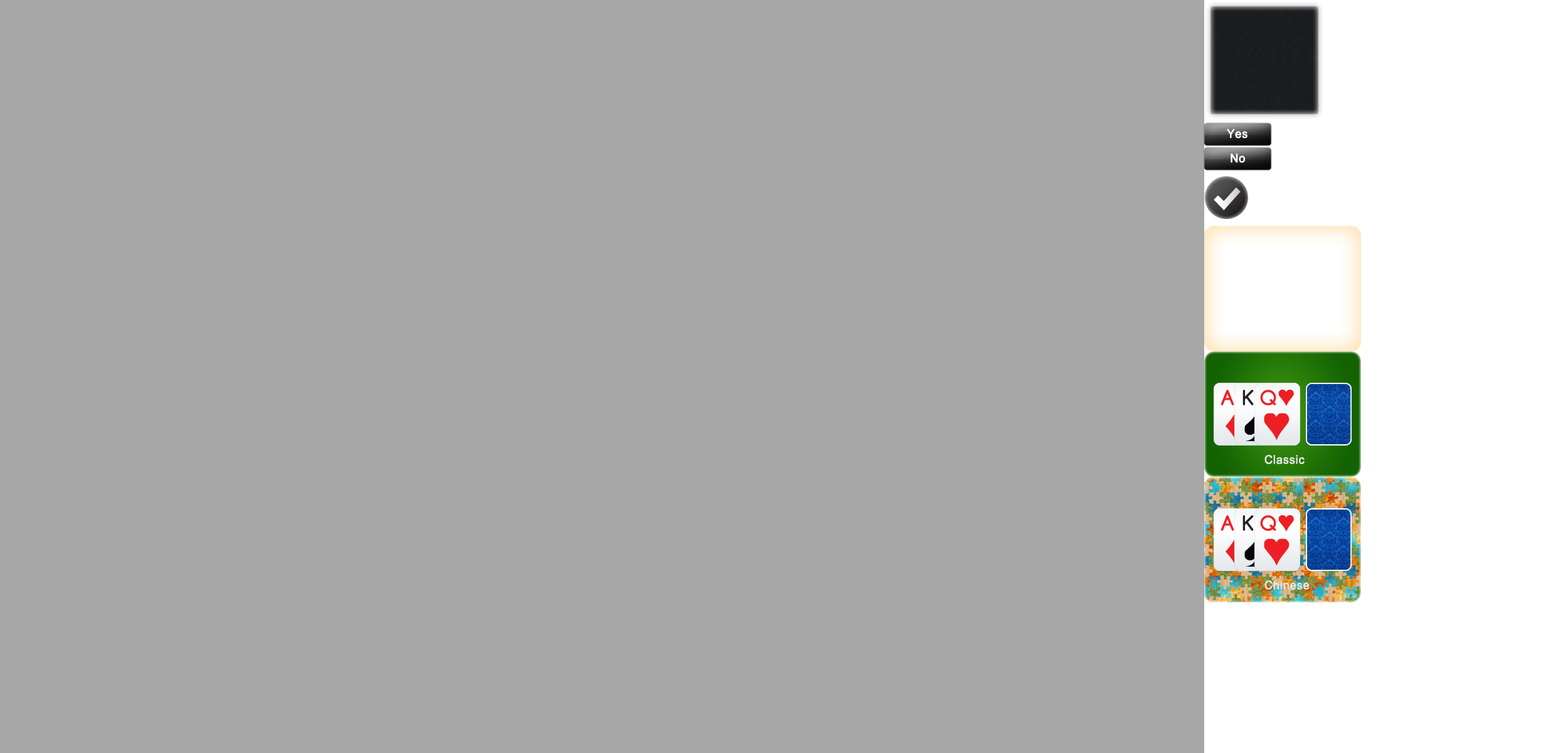
<style>
.page{position:relative;width:1568px;height:753px;background:#a7a7a7}
.page>*{position:absolute;margin:0}
.t1{font:11.9px "ArialMT";letter-spacing:0.025em;color:#ffffff;font-weight:bold;scale:0.95 1}
.t2{font:11.9px "ArialMT";letter-spacing:0.025em;color:#e6e6e6;font-weight:bold;scale:0.95 1}
</style>
<div class="page">
<p class="t1" style="left:1227px;top:129px;width:21px;height:10px">Yes</p>
<p class="t1" style="left:1231px;top:153px;width:14px;height:10px">No</p>
<p class="t2" style="left:1264px;top:454px;width:41px;height:10px">Classic</p>
<p class="t2" style="left:1264px;top:580px;width:46px;height:10px">Chinese</p>
</div>
